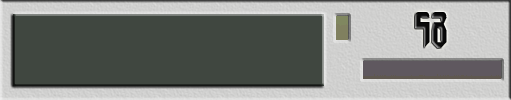
<style>
.page{position:relative;width:511px;height:100px;background:#404740}
.page>*{position:absolute;margin:0}
.t1{font:48px "Fedyral";color:#0a0a0a}
</style>
<div class="page">
<p class="t1" style="left:415px;top:12px;width:32px;height:36px">98</p>
</div>
